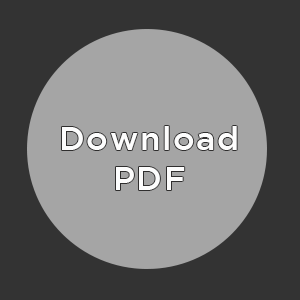
<style>
.page{position:relative;width:300px;height:300px;background:#333333}
.page>*{position:absolute;margin:0}
.t1{font:33.3px "GothamMedium";letter-spacing:0.04em;color:#fdfdfd}
</style>
<div class="page">
<p class="t1" style="left:62px;top:126px;width:175px;height:64px;text-align:center">Download<br>PDF</p>
</div>
